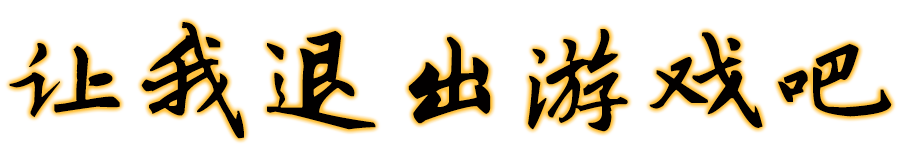
<style>
.page{position:relative;width:899px;height:165px;background:#ffffff}
.page>*{position:absolute;margin:0}
.t1{font:119.4px "SentyZHAO";color:#020000}
</style>
<div class="page">
<p class="t1" style="left:9px;top:22px;width:883px;height:117px">让我退出游戏吧</p>
</div>
